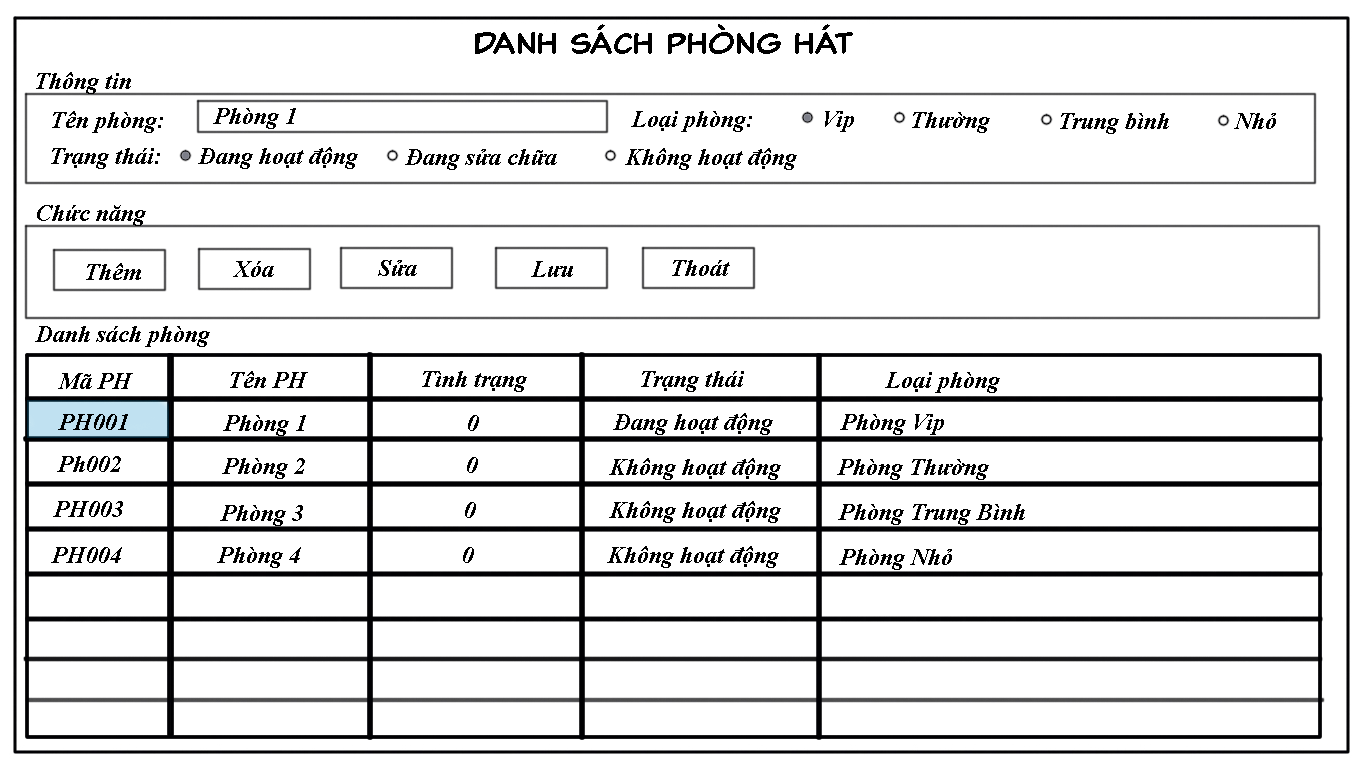
<style>
.page{position:relative;width:1366px;height:768px;background:#ffffff}
.page>*{position:absolute;margin:0}
.t1{font:30px "000ClassicComicTB-Normal";color:#000000}
.t2{font:24px "TimesNewRomanPS-BoldItalicMT";color:#000000}
</style>
<div class="page">
<p class="t1" style="left:475px;top:24px;width:378px;height:30px">Danh sách phòng hát</p>
<p class="t2" style="left:36px;top:72px;width:95px;height:22px">Thông tin</p>
<p class="t2" style="left:52px;top:111px;width:111px;height:22px">Tên phòng:</p>
<p class="t2" style="left:213px;top:108px;width:83px;height:21px">Phòng 1</p>
<p class="t2" style="left:631px;top:111px;width:121px;height:21px">Loại phòng:</p>
<p class="t2" style="left:825px;top:111px;width:29px;height:21px">Vip</p>
<p class="t2" style="left:912px;top:112px;width:78px;height:21px">Thường</p>
<p class="t2" style="left:1060px;top:113px;width:109px;height:21px">Trung bình</p>
<p class="t2" style="left:1234px;top:113px;width:42px;height:16px">Nhỏ</p>
<p class="t2" style="left:51px;top:148px;width:109px;height:21px">Trạng thái:</p>
<p class="t2" style="left:198px;top:147px;width:160px;height:22px">Đang hoạt động</p>
<p class="t2" style="left:405px;top:149px;width:152px;height:21px">Đang sửa chữa</p>
<p class="t2" style="left:625px;top:148px;width:172px;height:22px">Không hoạt động</p>
<p class="t2" style="left:37px;top:205px;width:109px;height:21px">Chức năng</p>
<p class="t2" style="left:86px;top:263px;width:55px;height:17px">Thêm</p>
<p class="t2" style="left:233px;top:261px;width:41px;height:16px">Xóa</p>
<p class="t2" style="left:378px;top:260px;width:39px;height:16px">Sửa</p>
<p class="t2" style="left:531px;top:261px;width:42px;height:16px">Lưu</p>
<p class="t2" style="left:672px;top:260px;width:58px;height:16px">Thoát</p>
<p class="t2" style="left:35px;top:326px;width:175px;height:21px">Danh sách phòng</p>
<p class="t2" style="left:58px;top:373px;width:75px;height:16px">Mã PH</p>
<p class="t2" style="left:230px;top:371px;width:78px;height:17px">Tên PH</p>
<p class="t2" style="left:422px;top:371px;width:105px;height:21px">Tình trạng</p>
<p class="t2" style="left:641px;top:371px;width:103px;height:21px">Trạng thái</p>
<p class="t2" style="left:885px;top:372px;width:115px;height:21px">Loại phòng</p>
<p class="t2" style="left:58px;top:414px;width:70px;height:16px">PH001</p>
<p class="t2" style="left:613px;top:413px;width:160px;height:22px">Đang hoạt động</p>
<p class="t2" style="left:840px;top:414px;width:104px;height:21px">Phòng Vip</p>
<p class="t2" style="left:223px;top:415px;width:83px;height:21px">Phòng 1</p>
<p class="t2" style="left:468px;top:415px;width:11px;height:16px">0</p>
<p class="t2" style="left:57px;top:456px;width:64px;height:16px">Ph002</p>
<p class="t2" style="left:222px;top:458px;width:83px;height:21px">Phòng 2</p>
<p class="t2" style="left:467px;top:457px;width:11px;height:16px">0</p>
<p class="t2" style="left:609px;top:458px;width:172px;height:22px">Không hoạt động</p>
<p class="t2" style="left:837px;top:459px;width:152px;height:21px">Phòng Thường</p>
<p class="t2" style="left:53px;top:501px;width:70px;height:16px">PH003</p>
<p class="t2" style="left:220px;top:505px;width:83px;height:21px">Phòng 3</p>
<p class="t2" style="left:465px;top:502px;width:11px;height:16px">0</p>
<p class="t2" style="left:609px;top:501px;width:172px;height:22px">Không hoạt động</p>
<p class="t2" style="left:838px;top:504px;width:187px;height:21px">Phòng Trung Bình</p>
<p class="t2" style="left:51px;top:547px;width:71px;height:16px">PH004</p>
<p class="t2" style="left:217px;top:547px;width:84px;height:21px">Phòng 4</p>
<p class="t2" style="left:463px;top:547px;width:11px;height:16px">0</p>
<p class="t2" style="left:607px;top:546px;width:172px;height:22px">Không hoạt động</p>
<p class="t2" style="left:839px;top:549px;width:113px;height:21px">Phòng Nhỏ</p>
</div>
